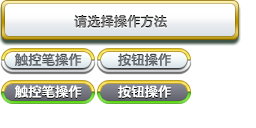
<style>
.page{position:relative;width:256px;height:128px;background:#ffffff}
.page>*{position:absolute;margin:0}
.t1{font:13.3px "FZFW-QingYinTiS-B--GB1-0"}
.t2{font:13.2px "FZFW-QingYinTiS-B--GB1-0";color:#6e737b}
.t3{font:12.9px "FZFW-QingYinTiS-B--GB1-0";color:#ffffff;scale:1.03 1}
</style>
<div class="page">
<p class="t1" style="left:74px;top:14px;width:93px;height:14px">请选择操作方法</p>
<p class="t2" style="left:15px;top:53px;width:67px;height:13px">触控笔操作</p>
<p class="t2" style="left:118px;top:53px;width:54px;height:13px">按钮操作</p>
<p class="t3" style="left:15px;top:85px;width:67px;height:13px">触控笔操作</p>
<p class="t3" style="left:118px;top:85px;width:54px;height:13px">按钮操作</p>
</div>
